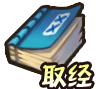
<style>
.page{position:relative;width:96px;height:89px;background:#ffffff}
.page>*{position:absolute;margin:0}
.t1{font:26px "DFPBuDingW12"}
</style>
<div class="page">
<p class="t1" style="left:42px;top:64px;width:50px;height:24px">取经</p>
</div>
